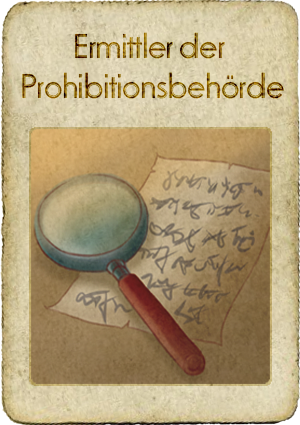
<style>
.page{position:relative;width:300px;height:425px}
.page>*{position:absolute;margin:0}
.t1{font:36px/40px "OdessaLetPlain";letter-spacing:-0.02em}
</style>
<div class="page">
<p class="t1" style="left:22px;top:32px;width:262px;height:67px;text-align:center">Ermittler der <br>Prohibitionsbehörde</p>
<p class="t1" style="left:22px;top:32px;width:262px;height:67px;text-align:center">Ermittler der <br>Prohibitionsbehörde</p>
</div>
